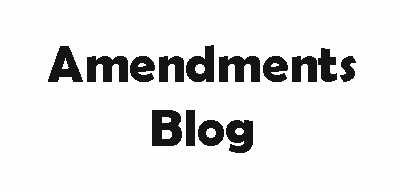
<style>
.page{position:relative;width:400px;height:192px;background:#fefefe}
.page>*{position:absolute;margin:0}
.t1{font:52.5px "BerlinSansFBDemi-Bold";color:#141414}
</style>
<div class="page">
<p class="t1" style="left:48px;top:45px;width:308px;height:108px;text-align:center">Amendments<br>Blog</p>
</div>
